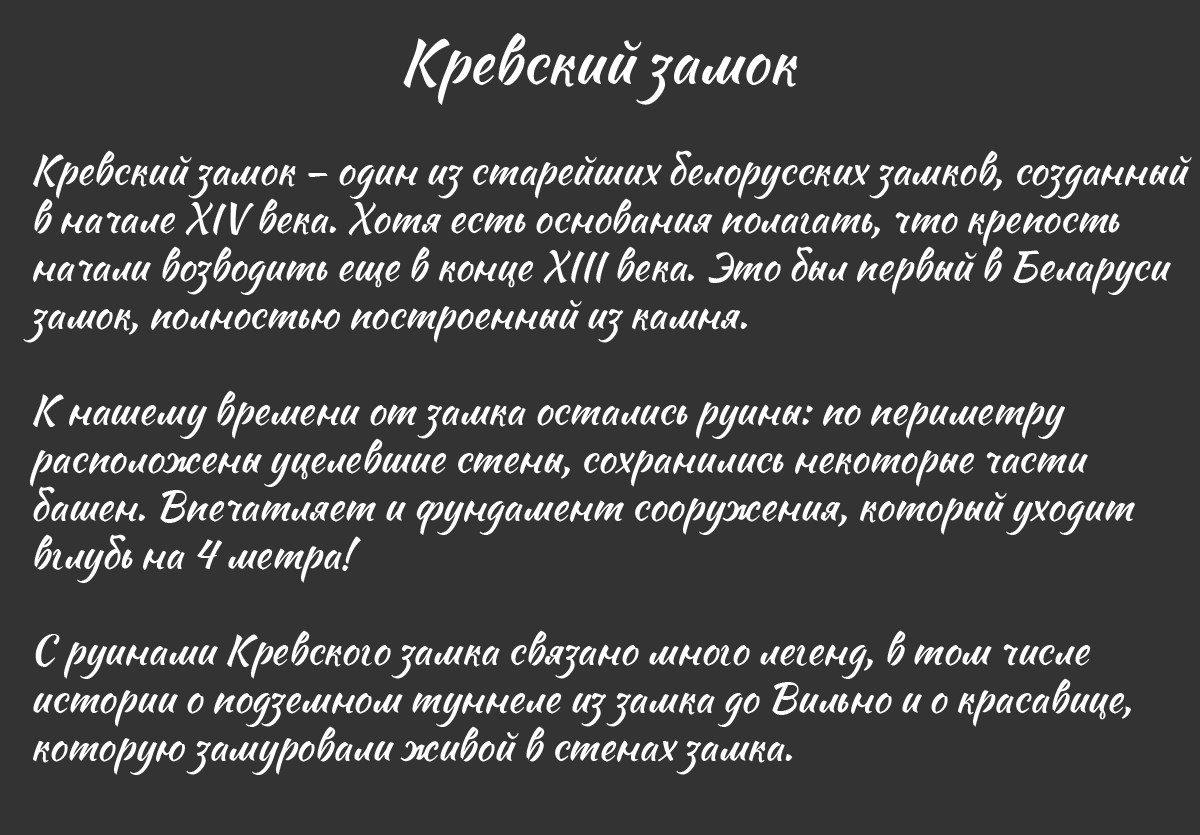
<style>
.page{position:relative;width:1200px;height:835px;background:#333333}
.page>*{position:absolute;margin:0}
.t1{font:60px "Sweet-Mavka-Script";color:#ffffff}
.t2{font:40px "Sweet-Mavka-Script";color:#ffffff}
</style>
<div class="page">
<p class="t1" style="left:403px;top:33px;width:395px;height:72px">Кревский замок</p>
<p class="t2" style="left:23px;top:150px;width:1169px;height:625px">Кревский замок – один из старейших белорусских замков, созданный <br>в начале XIV века. Хотя есть основания полагать, что крепость <br>начали возводить еще в конце XIII века. Это был первый в Беларуси <br>замок, полностью построенный из камня.<br><br>К нашему времени от замка остались руины: по периметру <br>расположены уцелевшие стены, сохранились некоторые части <br>башен. Впечатляет и фундамент сооружения, который уходит <br>вглубь на 4 метра!<br><br>С руинами Кревского замка связано много легенд, в том числе <br>истории о подземном туннеле из замка до Вильно и о красавице, <br>которую замуровали живой в стенах замка.</p>
</div>
